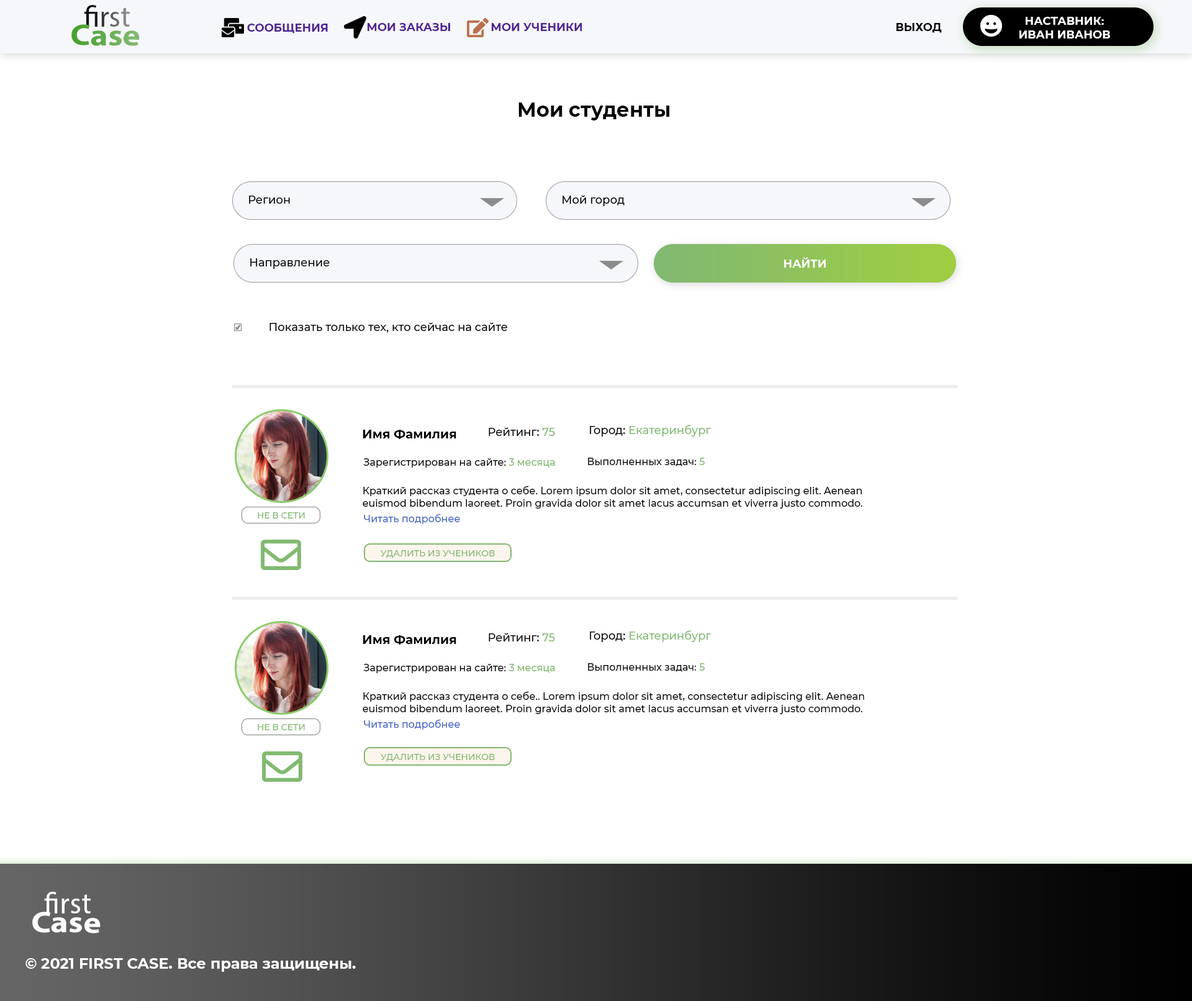
<style>
.page{position:relative;width:1192px;height:1001px;background:#ffffff}
.page>*{position:absolute;margin:0}
.t1{font:29.8px "MyriadPro-Regular"}
.t2{font:11.2px "Montserrat-Bold";color:#ffffff;text-transform:uppercase}
.t3{font:29.8px "MyriadPro-Bold";scale:1.13 1}
.t4{font:29.8px "MyriadPro-Regular";scale:1.13 1}
.t5{font:11.2px "Montserrat-Bold";color:#4f2492;text-transform:uppercase}
.t6{font:11.2px "Montserrat-Bold";color:#502492;text-transform:uppercase}
.t7{font:11.2px "Montserrat-Bold";color:#000000;text-transform:uppercase}
.t8{font:19.9px "Montserrat-Bold";color:#000000}
.t9{font:11.2px "Montserrat-Medium";color:#000000}
.t10{font:11.2px "Montserrat-Medium";color:#85bb76}
.t11{font:12.4px "Montserrat-Bold";color:#000000}
.t12{font:11.2px "Montserrat-Medium";color:#82b971}
.t13{font:9.9px "Montserrat-Medium";color:#000000}
.t14{font:9.9px "Montserrat-Medium";color:#82b971}
.t15{font:8.7px "Montserrat-Medium";color:#82b970}
.t16{font:9.9px "Montserrat-Medium";color:#4866c8}
.t17{font:29.8px "MyriadPro-Regular";color:#ffffff}
.t18{font:29.8px "MyriadPro-Bold";color:#ffffff;scale:1.13 1}
.t19{font:29.8px "MyriadPro-Regular";color:#ffffff;scale:1.13 1}
.t20{font:14.9px "Montserrat-Bold";color:#ffffff}
</style>
<div class="page">
<p class="t1" style="left:84px;top:5px;width:46px;height:22px">first</p>
<p class="t2" style="left:1019px;top:17px;width:91px;height:21px;text-align:center">наставник:<br>иВАН иВАНОВ</p>
<p class="t3" style="left:71px;top:24px;width:69px;height:22px;rotate:1deg"><span class="t4">       </span>Case</p>
<p class="t5" style="left:247px;top:24px;width:81px;height:10px">СООБЩЕНИЯ</p>
<p class="t6" style="left:367px;top:23px;width:83px;height:8px">МОИ ЗАКАЗЫ</p>
<p class="t5" style="left:492px;top:23px;width:90px;height:8px">мои ученики</p>
<p class="t7" style="left:896px;top:23px;width:46px;height:10px">ВЫХОД</p>
<p class="t8" style="left:518px;top:102px;width:152px;height:18px">Мои студенты</p>
<p class="t9" style="left:249px;top:196px;width:41px;height:8px">Регион</p>
<p class="t9" style="left:562px;top:195px;width:62px;height:11px">Мой город</p>
<p class="t2" style="left:784px;top:257px;width:42px;height:11px">найти</p>
<p class="t9" style="left:250px;top:258px;width:80px;height:11px">Направление</p>
<p class="t9" style="left:269px;top:322px;width:239px;height:11px">Показать только тех, кто сейчас на сайте</p>
<p class="t10" style="left:590px;top:425px;width:121px;height:11px"><span class="t9">Город: </span>Екатеринбург</p>
<p class="t11" style="left:363px;top:430px;width:93px;height:9px">Имя Фамилия</p>
<p class="t9" style="left:488px;top:427px;width:67px;height:9px">Рейтинг: <span class="t12">75</span></p>
<p class="t13" style="left:363px;top:458px;width:192px;height:9px">Зарегистрирован на сайте: <span class="t14">3 месяца</span></p>
<p class="t13" style="left:588px;top:457px;width:116px;height:9px">Выполненных задач: <span class="t14">5</span></p>
<p class="t13" style="left:362px;top:485px;width:500px;height:23px">Краткий рассказ студента о себе. Lorem ipsum dolor sit amet, consectetur adipiscing elit. Aenean <br>euismod bibendum laoreet. Proin gravida dolor sit amet lacus accumsan et viverra justo commodo.</p>
<p class="t15" style="left:258px;top:512px;width:47px;height:6px">НЕ В СЕТИ</p>
<p class="t16" style="left:364px;top:513px;width:96px;height:11px">Читать подробнее</p>
<p class="t15" style="left:380px;top:550px;width:115px;height:8px">УДАЛИТЬ ИЗ УЧЕНИКОВ</p>
<p class="t11" style="left:363px;top:635px;width:93px;height:9px">Имя Фамилия</p>
<p class="t9" style="left:488px;top:632px;width:67px;height:9px">Рейтинг: <span class="t12">75</span></p>
<p class="t10" style="left:590px;top:630px;width:121px;height:12px"><span class="t9">Город: </span>Екатеринбург</p>
<p class="t13" style="left:363px;top:664px;width:192px;height:9px">Зарегистрирован на сайте: <span class="t14">3 месяца</span></p>
<p class="t13" style="left:588px;top:663px;width:116px;height:9px">Выполненных задач: <span class="t14">5</span></p>
<p class="t13" style="left:362px;top:691px;width:502px;height:23px">Краткий рассказ студента о себе.. Lorem ipsum dolor sit amet, consectetur adipiscing elit. Aenean <br>euismod bibendum laoreet. Proin gravida dolor sit amet lacus accumsan et viverra justo commodo.</p>
<p class="t15" style="left:258px;top:724px;width:47px;height:6px">НЕ В СЕТИ</p>
<p class="t16" style="left:364px;top:719px;width:96px;height:10px">Читать подробнее</p>
<p class="t15" style="left:380px;top:754px;width:115px;height:8px">УДАЛИТЬ ИЗ УЧЕНИКОВ</p>
<p class="t17" style="left:44px;top:891px;width:47px;height:22px">first</p>
<p class="t18" style="left:32px;top:911px;width:69px;height:22px;rotate:1deg"><span class="t19">       </span>Case</p>
<p class="t20" style="left:25px;top:958px;width:331px;height:13px">© 2021 FIRST CASE. Все права защищены.</p>
</div>
